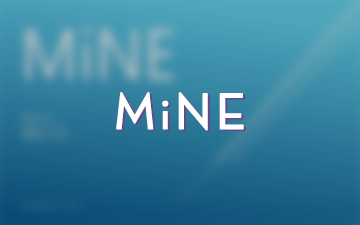
<style>
.page{position:relative;width:360px;height:225px}
.page>*{position:absolute;margin:0}
.t1{font:50.8px "DroidSansFallback";letter-spacing:0.082em;color:#ffffff;font-weight:bold}
.t2{font:50.8px "DroidSansFallback";letter-spacing:0.082em;font-weight:bold}
</style>
<div class="page">
<p class="t1" style="left:116px;top:92px;width:128px;height:39px">MiNE</p>
<p class="t2" style="left:118px;top:93px;width:128px;height:39px">MiNE</p>
</div>
